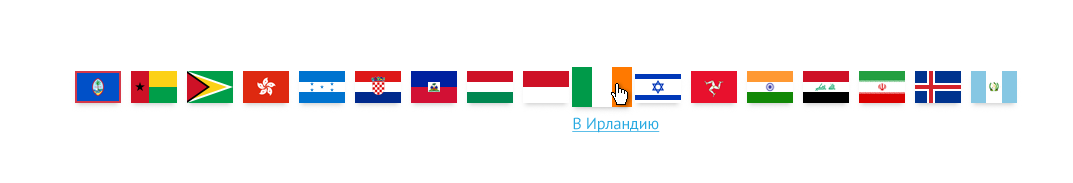
<style>
.page{position:relative;width:1073px;height:183px;background:#ffffff}
.page>*{position:absolute;margin:0}
.t1{font:16px "PTSans-Regular";color:#27a9e1;text-decoration:underline}
</style>
<div class="page">
<p class="t1" style="left:572px;top:117px;width:88px;height:16px">В Ирландию</p>
</div>
